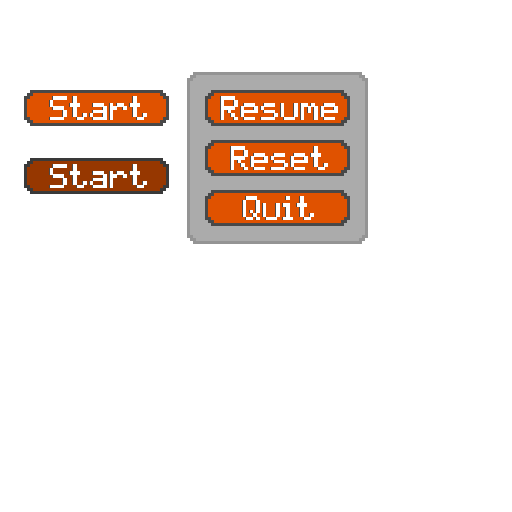
<style>
.page{position:relative;width:512px;height:512px;background:#ffffff}
.page>*{position:absolute;margin:0}
.t1{font:27.1px "pixelmix";color:#ffffff}
</style>
<div class="page">
<p class="t1" style="left:49px;top:96px;width:97px;height:24px">Start</p>
<p class="t1" style="left:50px;top:96px;width:97px;height:24px">Start</p>
<p class="t1" style="left:220px;top:96px;width:117px;height:24px">Resume</p>
<p class="t1" style="left:221px;top:96px;width:117px;height:24px">Resume</p>
<p class="t1" style="left:230px;top:146px;width:97px;height:24px">Reset</p>
<p class="t1" style="left:231px;top:146px;width:97px;height:24px">Reset</p>
<p class="t1" style="left:49px;top:164px;width:97px;height:24px">Start</p>
<p class="t1" style="left:50px;top:164px;width:97px;height:24px">Start</p>
<p class="t1" style="left:242px;top:196px;width:71px;height:24px">Quit</p>
<p class="t1" style="left:243px;top:196px;width:71px;height:24px">Quit</p>
</div>
